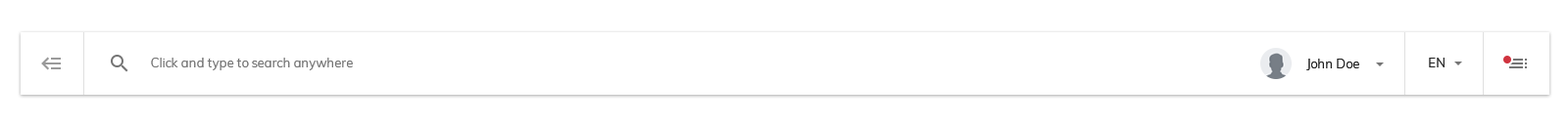
<style>
.page{position:relative;width:1568px;height:125px;background:#ffffff}
.page>*{position:absolute;margin:0}
.t1{font:12.7px "Muli-Regular";color:#757575}
.t2{font:12.7px "Muli-Regular";color:#212121}
</style>
<div class="page">
<p class="t1" style="left:151px;top:58px;width:202px;height:13px">Click and type to search anywhere</p>
<p class="t2" style="left:1306px;top:59px;width:53px;height:12px">John Doe</p>
<p class="t2" style="left:1429px;top:58px;width:16px;height:10px">EN</p>
</div>
